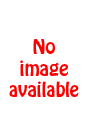
<style>
.page{position:relative;width:90px;height:135px;background:#ffffff}
.page>*{position:absolute;margin:0}
.t1{font:18px "HoboStd";color:#ff0000}
</style>
<div class="page">
<p class="t1" style="left:9px;top:39px;width:70px;height:58px;text-align:center">No<br>image<br>available</p>
</div>
